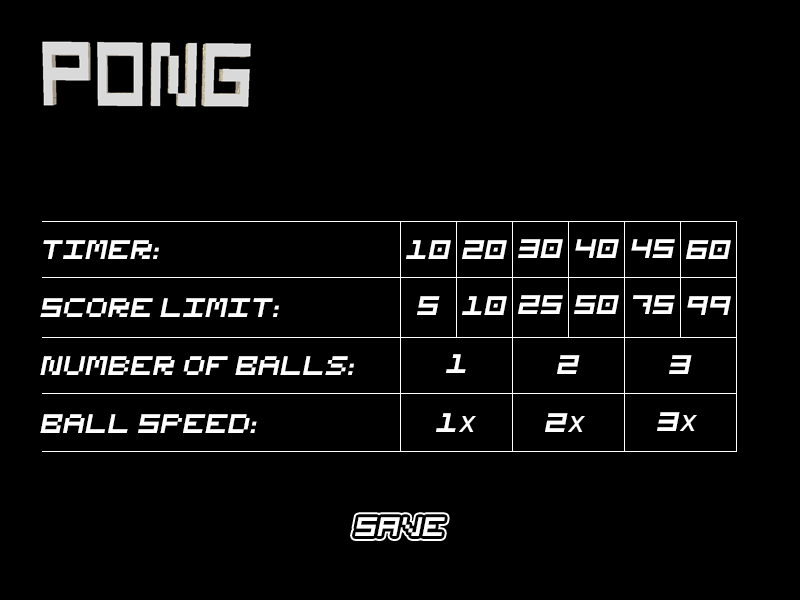
<style>
.page{position:relative;width:800px;height:600px;background:#000000}
.page>*{position:absolute;margin:0}
.t1{font:30px "Bit5x5";color:#ffffff;font-style:italic}
.t2{font:30px "ArialMT";color:#ffffff;font-style:italic}
</style>
<div class="page">
<p class="t1" style="left:43px;top:240px;width:116px;height:19px">Timer:</p>
<p class="t1" style="left:406px;top:240px;width:45px;height:19px">10</p>
<p class="t1" style="left:462px;top:240px;width:45px;height:19px">20</p>
<p class="t1" style="left:518px;top:239px;width:45px;height:19px">30</p>
<p class="t1" style="left:575px;top:239px;width:44px;height:19px">40</p>
<p class="t1" style="left:631px;top:239px;width:44px;height:19px">45</p>
<p class="t1" style="left:686px;top:240px;width:45px;height:19px">60</p>
<p class="t1" style="left:40px;top:298px;width:239px;height:19px">Score LImit:</p>
<p class="t1" style="left:417px;top:296px;width:23px;height:19px">5</p>
<p class="t1" style="left:462px;top:296px;width:45px;height:19px">10</p>
<p class="t1" style="left:518px;top:295px;width:45px;height:19px">25</p>
<p class="t1" style="left:574px;top:295px;width:45px;height:19px">50</p>
<p class="t1" style="left:633px;top:295px;width:42px;height:19px">75</p>
<p class="t1" style="left:687px;top:296px;width:44px;height:19px">99</p>
<p class="t1" style="left:40px;top:356px;width:314px;height:19px">Number of Balls:</p>
<p class="t1" style="left:446px;top:354px;width:20px;height:19px">1</p>
<p class="t1" style="left:557px;top:355px;width:23px;height:19px">2</p>
<p class="t1" style="left:669px;top:355px;width:23px;height:19px">3</p>
<p class="t1" style="left:40px;top:414px;width:217px;height:19px">Ball Speed:</p>
<p class="t1" style="left:436px;top:413px;width:40px;height:19px">1<span class="t2">x</span></p>
<p class="t1" style="left:545px;top:413px;width:40px;height:19px">2<span class="t2">x</span></p>
<p class="t1" style="left:657px;top:412px;width:40px;height:19px">3<span class="t2">x</span></p>
<p class="t1" style="left:355px;top:517px;width:90px;height:19px">SAVE</p>
</div>
